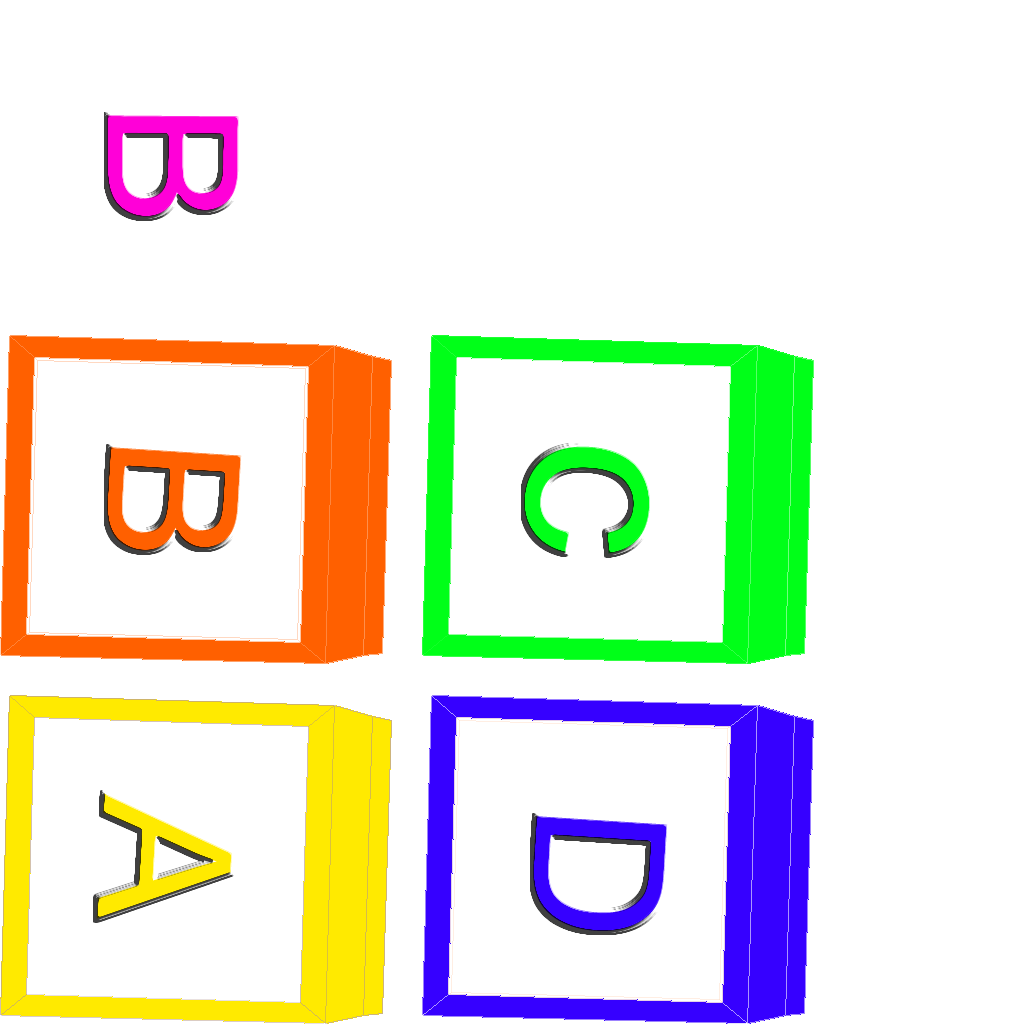
<style>
.page{position:relative;width:1024px;height:1024px;background:#ffffff}
.page>*{position:absolute;margin:0}
.t1{font:182.8px "ArialMT";color:#ff00d8}
.t2{font:182.8px "ArialMT";color:#ff6000}
.t3{font:231.9px "ArialMT";color:#00ff18}
.t4{font:182.8px "ArialMT";color:#ffea00}
.t5{font:182.8px "ArialMT";color:#3600ff}
</style>
<div class="page">
<p class="t1" style="left:107px;top:115px;width:132px;height:102px;rotate:90deg">B</p>
<p class="t2" style="left:107px;top:447px;width:135px;height:104px;rotate:93deg">B</p>
<p class="t3" style="left:524px;top:446px;width:126px;height:108px;rotate:93deg">c</p>
<p class="t4" style="left:96px;top:793px;width:136px;height:126px;rotate:93deg">A</p>
<p class="t5" style="left:533px;top:816px;width:135px;height:115px;rotate:93deg">D</p>
</div>
